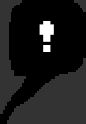
<style>
.page{position:relative;width:86px;height:124px;background:#000000}
.page>*{position:absolute;margin:0}
.t1{font:55px "FixedsysExcelsiorIIIb";letter-spacing:0.121em;color:#ffffff}
</style>
<div class="page">
<p class="t1" style="left:39px;top:21px;width:15px;height:31px">!</p>
</div>
